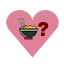
<style>
.page{position:relative;width:64px;height:64px;background:#ffffff}
.page>*{position:absolute;margin:0}
.t1{font:19.2px "Arial-Black";color:#690000}
</style>
<div class="page">
<p class="t1" style="left:38px;top:22px;width:11px;height:14px">?</p>
</div>
